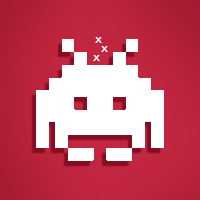
<style>
.page{position:relative;width:200px;height:200px;background:#ffffff}
.page>*{position:absolute;margin:0}
.t1{font:12.5px "Biko";color:#ffffff}
</style>
<div class="page">
<p class="t1" style="left:95px;top:37px;width:7px;height:6px">x</p>
<p class="t1" style="left:101px;top:46px;width:7px;height:6px">x</p>
<p class="t1" style="left:93px;top:55px;width:7px;height:6px">x</p>
</div>
